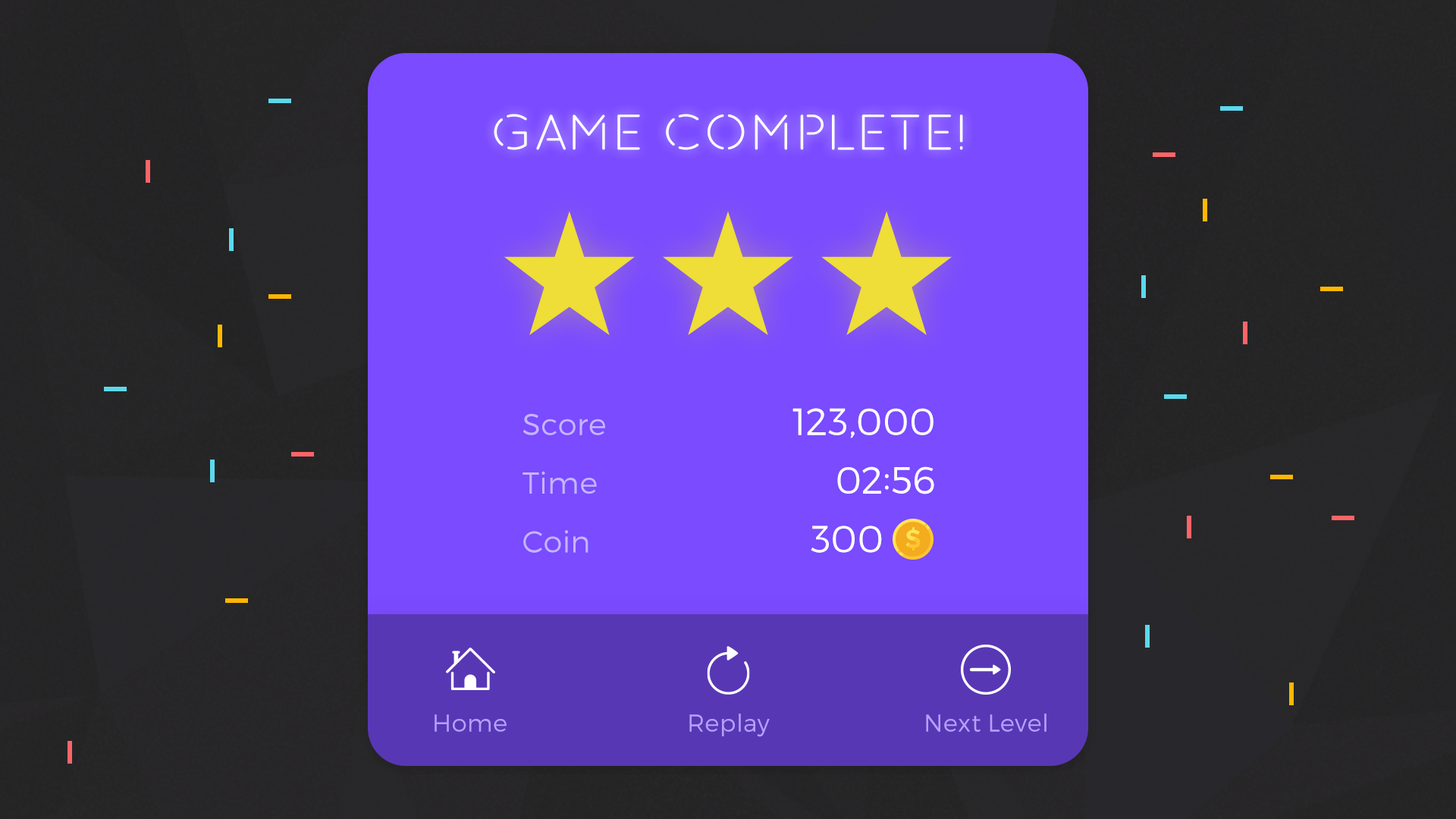
<style>
.page{position:relative;width:1456px;height:819px;background:#7a4bff}
.page>*{position:absolute;margin:0}
.t1{font:30.3px/58.6px "Montserrat-Light";color:#c6b4ff}
.t2{font:37.9px/58.6px "Montserrat-Light";color:#ffffff;text-transform:uppercase}
.t3{font:24.3px "Montserrat-Light";color:#b69fff}
</style>
<div class="page">
<p class="t1" style="left:522px;top:413px;width:83px;height:140px">Score<br>Time<br>Coin</p>
<p class="t2" style="left:792px;top:408px;width:142px;height:145px;text-align:right">123,000<br>02:56<br>300</p>
<p class="t3" style="left:689px;top:714px;width:81px;height:23px">Replay</p>
<p class="t3" style="left:926px;top:714px;width:120px;height:18px">Next Level</p>
<p class="t3" style="left:435px;top:714px;width:72px;height:18px">Home</p>
</div>
